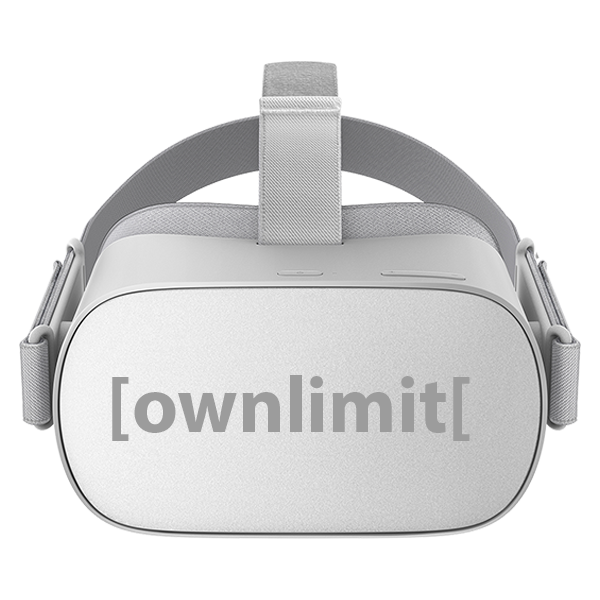
<style>
.page{position:relative;width:600px;height:600px;background:#ffffff}
.page>*{position:absolute;margin:0}
.t1{font:79.6px "MyriadPro-Bold";color:#9c9c9c}
</style>
<div class="page">
<p class="t1" style="left:112px;top:375px;width:358px;height:66px">[ownlimit[</p>
</div>
